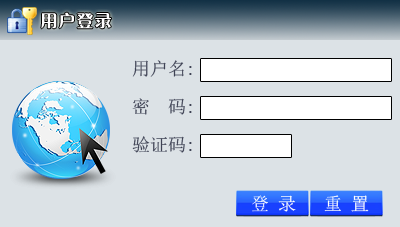
<style>
.page{position:relative;width:400px;height:227px;background:#dce2e6}
.page>*{position:absolute;margin:0}
.t1{font:18px "SimSun";color:#3e4254}
.t2{font:18px "SimSun";color:#ffffff}
</style>
<div class="page">
<p class="t1" style="left:132px;top:60px;width:60px;height:17px">用户名:</p>
<p class="t1" style="left:132px;top:98px;width:60px;height:17px">密　码:</p>
<p class="t1" style="left:132px;top:136px;width:60px;height:17px">验证码:</p>
<p class="t2" style="left:252px;top:195px;width:44px;height:17px">登 录</p>
<p class="t2" style="left:324px;top:195px;width:45px;height:17px">重 置</p>
</div>
